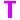
<style>
.page{position:relative;width:20px;height:20px;background:#ffffff}
.page>*{position:absolute;margin:0}
.t1{font:23.8px "BebasNeue-Regular";color:#de00ff;scale:1.5 1}
</style>
<div class="page">
<p class="t1" style="left:4px;top:1px;width:12px;height:17px">T</p>
</div>
